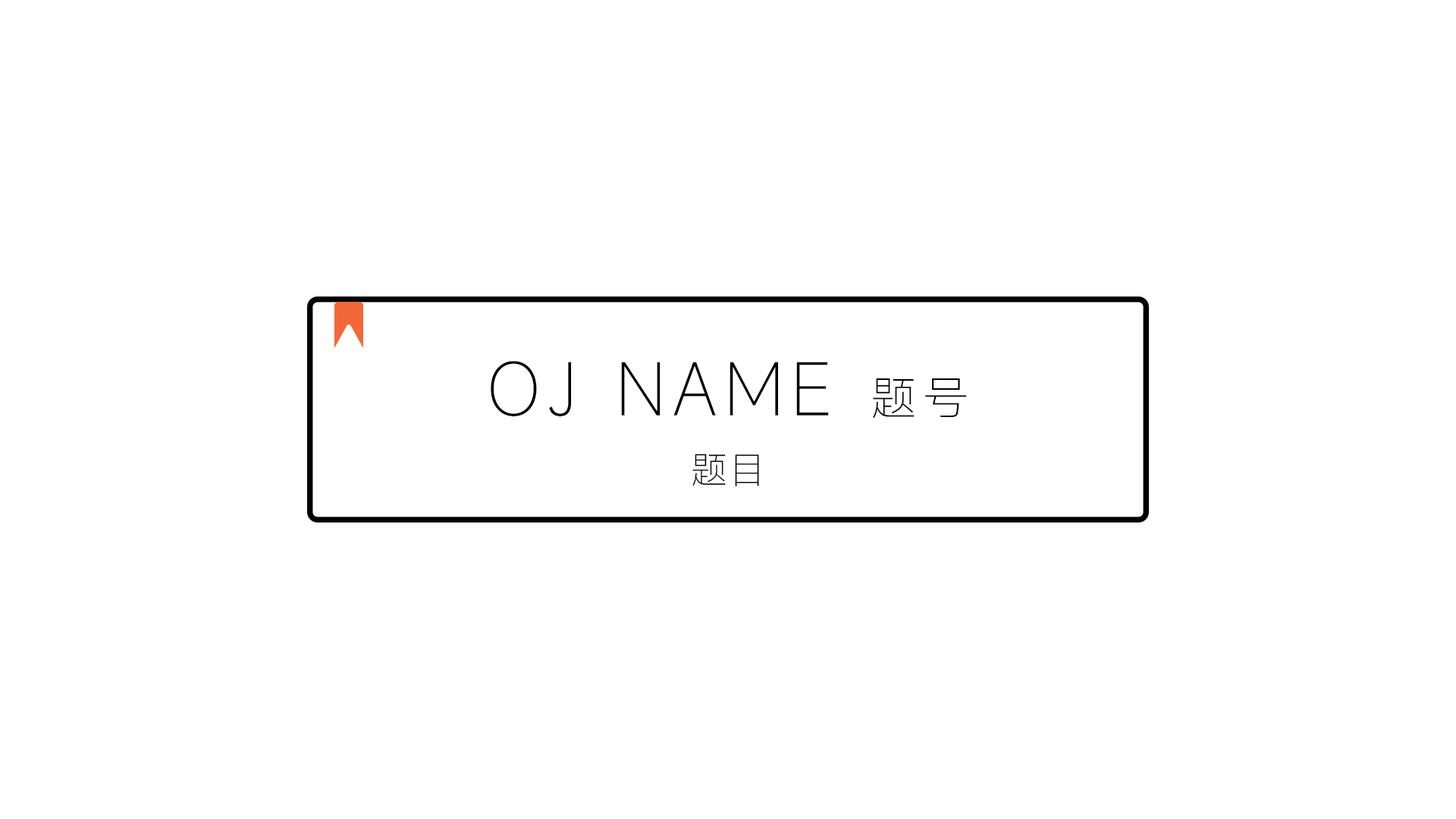
<style>
.page{position:relative;width:1456px;height:819px;background:#ffffff}
.page>*{position:absolute;margin:0}
.t1{font:70.8px "MiSans-ExtraLight";letter-spacing:0.1em;color:#000000}
.t2{font:47.4px "MiSans-ExtraLight";letter-spacing:0.1em;color:#000000}
.t3{font:37.9px "MiSans-ExtraLight";color:#000000}
</style>
<div class="page">
<p class="t1" style="left:491px;top:361px;width:476px;height:58px">OJ NAME <span class="t2">题号</span></p>
<p class="t3" style="left:692px;top:453px;width:67px;height:34px">题目</p>
</div>
